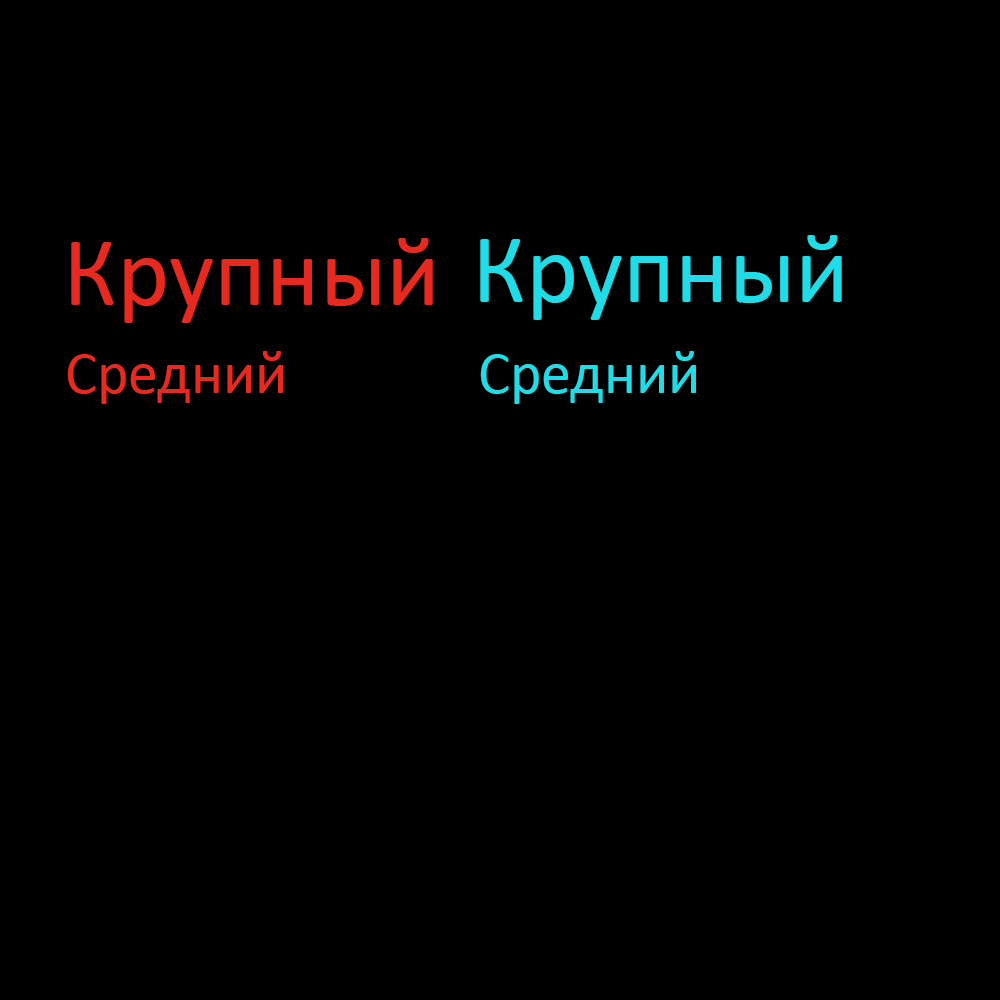
<style>
.page{position:relative;width:1000px;height:1000px;background:#000000}
.page>*{position:absolute;margin:0}
.t1{font:100px "Calibri";color:#e62a20}
.t2{font:100px "Calibri";color:#20dce6}
.t3{font:60px "Calibri";color:#e62a20}
.t4{font:60px "Calibri";color:#20dce6}
</style>
<div class="page">
<p class="t1" style="left:71px;top:238px;width:362px;height:85px">Крупный</p>
<p class="t2" style="left:480px;top:235px;width:362px;height:85px">Крупный</p>
<p class="t3" style="left:67px;top:351px;width:216px;height:53px">Средний</p>
<p class="t4" style="left:480px;top:351px;width:216px;height:53px">Средний</p>
</div>
